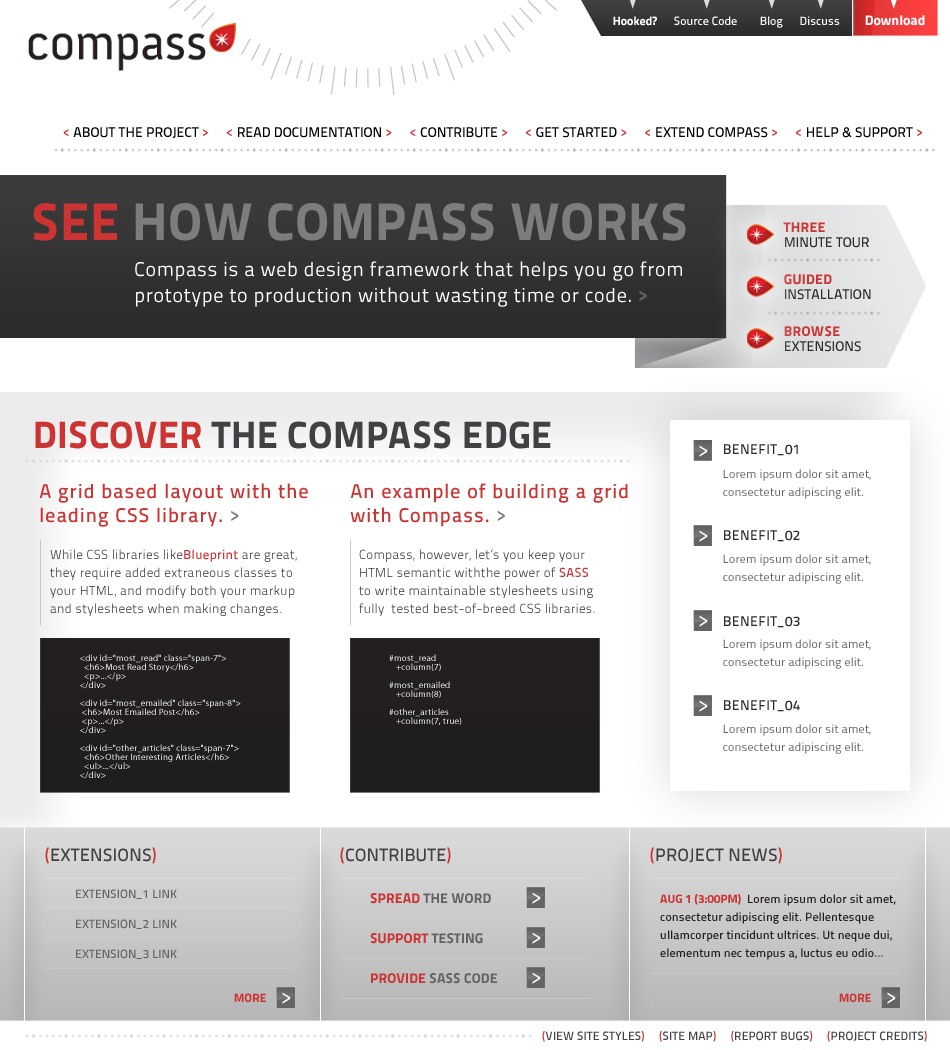
<style>
.page{position:relative;width:950px;height:1050px;background:#ffffff}
.page>*{position:absolute;margin:0}
.t1{font:12px "TitilliumText14L-600wt";color:#ffffff}
.t2{font:12px "TitilliumText14L-999wt";color:#ffffff}
.t3{font:14px "TitilliumText14L-999wt";color:#ffffff}
.t4{font:14px "TitilliumText14L-600wt";color:#000000}
.t5{font:14px "TitilliumText14L-600wt";color:#d42228}
.t6{font:53px "TitilliumText14L-999wt";letter-spacing:0.01em;color:#7d7d7d}
.t7{font:53px "TitilliumText14L-999wt";letter-spacing:0.01em;color:#cc3333}
.t8{font:14px/15px "TitilliumText14L-600wt";color:#2b2b2b}
.t9{font:14px/15px "TitilliumText14L-999wt";letter-spacing:0.025em;color:#cc3333}
.t10{font:20px/26px "TitilliumText14L-400wt";letter-spacing:0.03em;color:#ffffff}
.t11{font:20px/26px "TitilliumText14L-800wt";letter-spacing:0.03em;color:#636466}
.t12{font:38px "TitilliumText14L-999wt";letter-spacing:0.01em;color:#414042}
.t13{font:38px "TitilliumText14L-999wt";letter-spacing:0.01em;color:#cc3333}
.t14{font:22.5px "TitilliumText14L-400wt";letter-spacing:0.025em;color:#ffffff}
.t15{font:14px "TitilliumText14L-600wt";letter-spacing:0.025em;color:#2b2a2b}
.t16{font:12px/18px "TitilliumText14L-400wt";letter-spacing:0.01em;color:#646464}
.t17{font:20px/24px "TitilliumText14L-600wt";letter-spacing:0.05em;color:#cc3333}
.t18{font:20px/24px "TitilliumText14L-600wt";letter-spacing:0.05em;color:#7d7d7d}
.t19{font:13px/18px "TitilliumText14L-250wt";letter-spacing:0.025em;color:#333132}
.t20{font:13px/18px "TitilliumText14L-600wt";letter-spacing:0.025em;color:#cc3333}
.t21{font:9px/9px "MyriadPro-Regular";letter-spacing:0.025em;color:#ffffff}
.t22{font:9px/9px "MyriadPro-Regular";letter-spacing:0.025em}
.t23{font:18px "TitilliumText14L-600wt";letter-spacing:0.01em;color:#414042}
.t24{font:18px "TitilliumText14L-600wt";letter-spacing:0.01em;color:#cc3333}
.t25{font:12px "TitilliumText14L-600wt";letter-spacing:0.01em;color:#646464}
.t26{font:14px "TitilliumText14L-999wt";letter-spacing:0.01em;color:#646464}
.t27{font:14px "TitilliumText14L-999wt";letter-spacing:0.01em;color:#cc3333}
.t28{font:12px/18px "TitilliumText14L-600wt";letter-spacing:0.01em;color:#231f20}
.t29{font:12px/18px "TitilliumText14L-999wt";letter-spacing:0.01em;color:#cc3333}
.t30{font:12px "TitilliumText14L-999wt";letter-spacing:0.01em;color:#cc3333}
.t31{font:12px "TitilliumText14L-600wt";letter-spacing:0.01em;color:#414042}
.t32{font:12px "TitilliumText14L-600wt";letter-spacing:0.01em;color:#cc3333}
</style>
<div class="page">
<p class="t1" style="left:613px;top:16px;width:227px;height:12px"><span class="t2">Hooked?</span>      Source Code        Blog      Discuss</p>
<p class="t3" style="left:865px;top:15px;width:60px;height:11px">Download</p>
<p class="t4" style="left:63px;top:127px;width:859px;height:11px"><span class="t5">&lt; </span>ABOUT THE PROJECT<span class="t5"> &gt;     &lt; </span>READ DOCUMENTATION <span class="t5">&gt;     &lt; </span>CONTRIBUTE <span class="t5">&gt;     &lt; </span>GET STARTED <span class="t5">&gt;     &lt; </span>EXTEND COMPASS <span class="t5">&gt;     &lt; </span>HELP &amp; SUPPORT <span class="t5">&gt;</span></p>
<p class="t6" style="left:33px;top:203px;width:653px;height:38px"><span class="t7">SEE </span>HOW COMPASS WORKS</p>
<p class="t8" style="left:783px;top:222px;width:86px;height:26px"><span class="t9">THREE<br></span>MINUTE TOUR</p>
<p class="t10" style="left:135px;top:261px;width:547px;height:46px">Compass is a web design framework that helps you go from <br>prototype to production without wasting time or code. <span class="t11">&gt;</span></p>
<p class="t8" style="left:784px;top:274px;width:87px;height:26px"><span class="t9">GUIDED<br></span>INSTALLATION</p>
<p class="t8" style="left:784px;top:326px;width:77px;height:26px"><span class="t9">BROWSE<br></span>EXTENSIONS</p>
<p class="t12" style="left:35px;top:421px;width:516px;height:28px"><span class="t13">DISCOVER</span> THE COMPASS EDGE</p>
<p class="t14" style="left:699px;top:445px;width:9px;height:12px">&gt;</p>
<p class="t15" style="left:724px;top:444px;width:74px;height:12px">BENEFIT_01</p>
<p class="t16" style="left:723px;top:469px;width:148px;height:30px">Lorem ipsum dolor sit amet, <br>consectetur adipiscing elit.</p>
<p class="t17" style="left:39px;top:483px;width:269px;height:44px">A grid based layout with the<br>leading CSS library. <span class="t18">&gt;</span></p>
<p class="t17" style="left:350px;top:483px;width:278px;height:44px">An example of building a grid <br>with Compass. <span class="t18">&gt;</span></p>
<p class="t14" style="left:699px;top:530px;width:9px;height:12px">&gt;</p>
<p class="t15" style="left:724px;top:530px;width:76px;height:12px">BENEFIT_02</p>
<p class="t19" style="left:50px;top:549px;width:247px;height:67px">While CSS libraries like<span class="t20">Blueprint</span> are great, <br>they require added extraneous classes to <br>your HTML, and modify both your markup and stylesheets when making changes.</p>
<p class="t19" style="left:359px;top:549px;width:236px;height:67px">Compass, however, let’s you keep your <br>HTML semantic withthe power of <span class="t20">SASS </span>to write maintainable stylesheets using fully  tested best-of-breed CSS libraries.</p>
<p class="t16" style="left:723px;top:554px;width:148px;height:30px">Lorem ipsum dolor sit amet, <br>consectetur adipiscing elit.</p>
<p class="t14" style="left:699px;top:615px;width:9px;height:12px">&gt;</p>
<p class="t15" style="left:724px;top:616px;width:76px;height:12px">BENEFIT_03</p>
<p class="t16" style="left:723px;top:639px;width:148px;height:30px">Lorem ipsum dolor sit amet, <br>consectetur adipiscing elit.</p>
<p class="t21" style="left:80px;top:654px;width:161px;height:125px">&lt;div id="most_read" class="span-7"&gt;<br>  &lt;h6&gt;Most Read Story&lt;/h6&gt;<br>  &lt;p&gt;...&lt;/p&gt;<br>&lt;/div&gt;<br><br>&lt;div id="most_emailed" class="span-8"&gt;<br> &lt;h6&gt;Most Emailed Post&lt;/h6&gt;<br> &lt;p&gt;...&lt;/p&gt;<br>&lt;/div&gt;<br><br>&lt;div id="other_articles" class="span-7"&gt;<br>  &lt;h6&gt;Other Interesting Articles&lt;/h6&gt;<br>  &lt;ul&gt;...&lt;/ul&gt;<br>&lt;/div&gt;</p>
<p class="t22" style="left:389px;top:654px;width:73px;height:71px">#most_read<br>   +column(7)<br><br>#most_emailed<br>   +column(8)<br><br>#other_articles<br>   +column(7, true)</p>
<p class="t14" style="left:699px;top:700px;width:9px;height:12px">&gt;</p>
<p class="t15" style="left:724px;top:700px;width:76px;height:12px">BENEFIT_04</p>
<p class="t16" style="left:723px;top:724px;width:148px;height:30px">Lorem ipsum dolor sit amet, <br>consectetur adipiscing elit.</p>
<p class="t23" style="left:45px;top:847px;width:111px;height:17px"><span class="t24">(</span>EXTENSIONS<span class="t24">)</span></p>
<p class="t23" style="left:340px;top:847px;width:111px;height:17px"><span class="t24">(</span>CONTRIBUTE<span class="t24">)</span></p>
<p class="t23" style="left:650px;top:847px;width:132px;height:17px"><span class="t24">(</span>PROJECT NEWS<span class="t24">)</span></p>
<p class="t25" style="left:76px;top:889px;width:101px;height:10px">EXTENSION_1 LINK</p>
<p class="t26" style="left:370px;top:893px;width:121px;height:11px"><span class="t27">SPREAD </span>THE WORD</p>
<p class="t14" style="left:532px;top:892px;width:9px;height:12px">&gt;</p>
<p class="t28" style="left:660px;top:894px;width:236px;height:66px"><span class="t29">AUG 1 (3:00PM)  </span>Lorem ipsum dolor sit amet, <br>consectetur adipiscing elit. Pellentesque <br>ullamcorper tincidunt ultrices. Ut neque dui, <br>elementum nec tempus a, luctus eu odio...</p>
<p class="t25" style="left:76px;top:919px;width:101px;height:10px">EXTENSION_2 LINK</p>
<p class="t27" style="left:370px;top:933px;width:113px;height:11px">SUPPORT <span class="t26">TESTING</span></p>
<p class="t14" style="left:532px;top:932px;width:9px;height:12px">&gt;</p>
<p class="t25" style="left:76px;top:949px;width:101px;height:10px">EXTENSION_3 LINK</p>
<p class="t26" style="left:371px;top:973px;width:126px;height:11px"><span class="t27">PROVIDE </span>SASS CODE</p>
<p class="t14" style="left:532px;top:972px;width:9px;height:12px">&gt;</p>
<p class="t30" style="left:234px;top:993px;width:32px;height:9px">MORE</p>
<p class="t14" style="left:282px;top:992px;width:9px;height:12px">&gt;</p>
<p class="t30" style="left:839px;top:993px;width:32px;height:9px">MORE</p>
<p class="t14" style="left:887px;top:992px;width:9px;height:12px">&gt;</p>
<p class="t31" style="left:542px;top:1031px;width:385px;height:11px"><span class="t32">(</span>VIEW SITE STYLES<span class="t32">)     (</span>SITE MAP<span class="t32">)     (</span>REPORT BUGS<span class="t32">)     (</span>PROJECT CREDITS<span class="t32">)</span></p>
</div>
